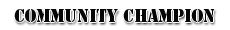
<style>
.page{position:relative;width:230px;height:30px;background:#ffffff}
.page>*{position:absolute;margin:0}
.t1{font:17.2px "StencilStd";color:#000000;text-transform:uppercase;scale:0.94 1}
</style>
<div class="page">
<p class="t1" style="left:14px;top:9px;width:201px;height:13px">Community Champion</p>
</div>
